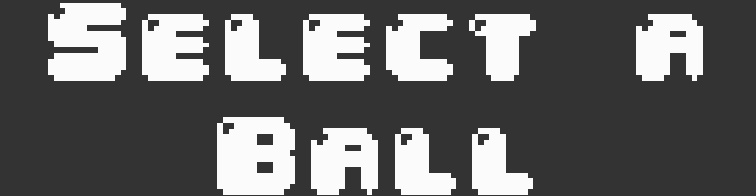
<style>
.page{position:relative;width:756px;height:196px;background:#333333}
.page>*{position:absolute;margin:0}
.t1{font:95.2px "04b30";letter-spacing:0.05em;color:#fbfbfb}
</style>
<div class="page">
<p class="t1" style="left:48px;top:3px;width:655px;height:192px;text-align:center">Select a Ball</p>
</div>
